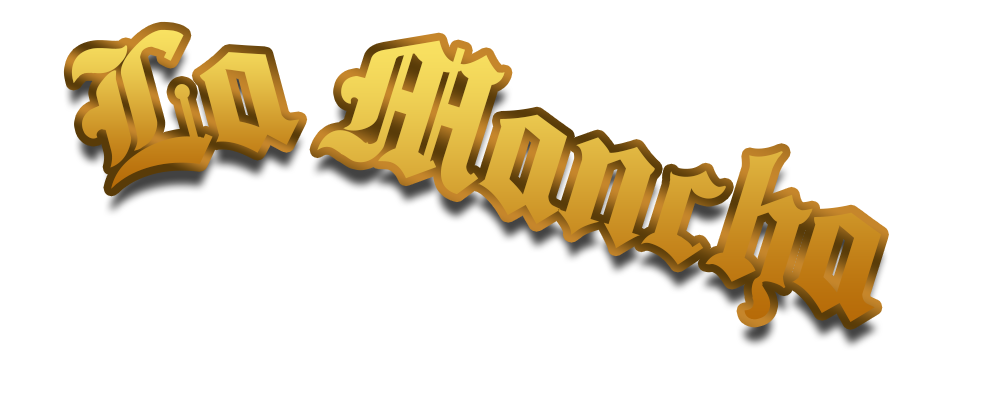
<style>
.page{position:relative;width:1000px;height:414px;background:#ffffff}
.page>*{position:absolute;margin:0}
.t1{font:210.5px "Ancient-Medium"}
.t2{font:210.1px "Ancient-Medium"}
</style>
<div class="page">
<p class="t1" style="left:71px;top:29px;width:229px;height:160px;rotate:-15deg">La</p>
<p class="t2" style="left:317px;top:40px;width:564px;height:282px;rotate:17deg">Mancha</p>
</div>
